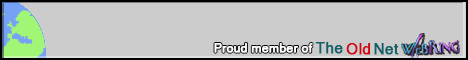
<style>
.page{position:relative;width:468px;height:60px;background:#cccccc}
.page>*{position:absolute;margin:0}
.t1{font:12.2px "MicrosoftSansSerif";color:#ffffff;font-weight:bold}
.t2{font:15.2px "MicrosoftSansSerif";color:#0f6068;font-weight:bold}
.t3{font:15.2px "MicrosoftSansSerif";color:#d20310;font-weight:bold}
</style>
<div class="page">
<p class="t1" style="left:214px;top:43px;width:99px;height:10px">Proud member of</p>
<p class="t2" style="left:315px;top:42px;width:28px;height:12px">The</p>
<p class="t3" style="left:346px;top:43px;width:25px;height:12px">Old</p>
<p class="t2" style="left:374px;top:43px;width:25px;height:12px">Net</p>
</div>
